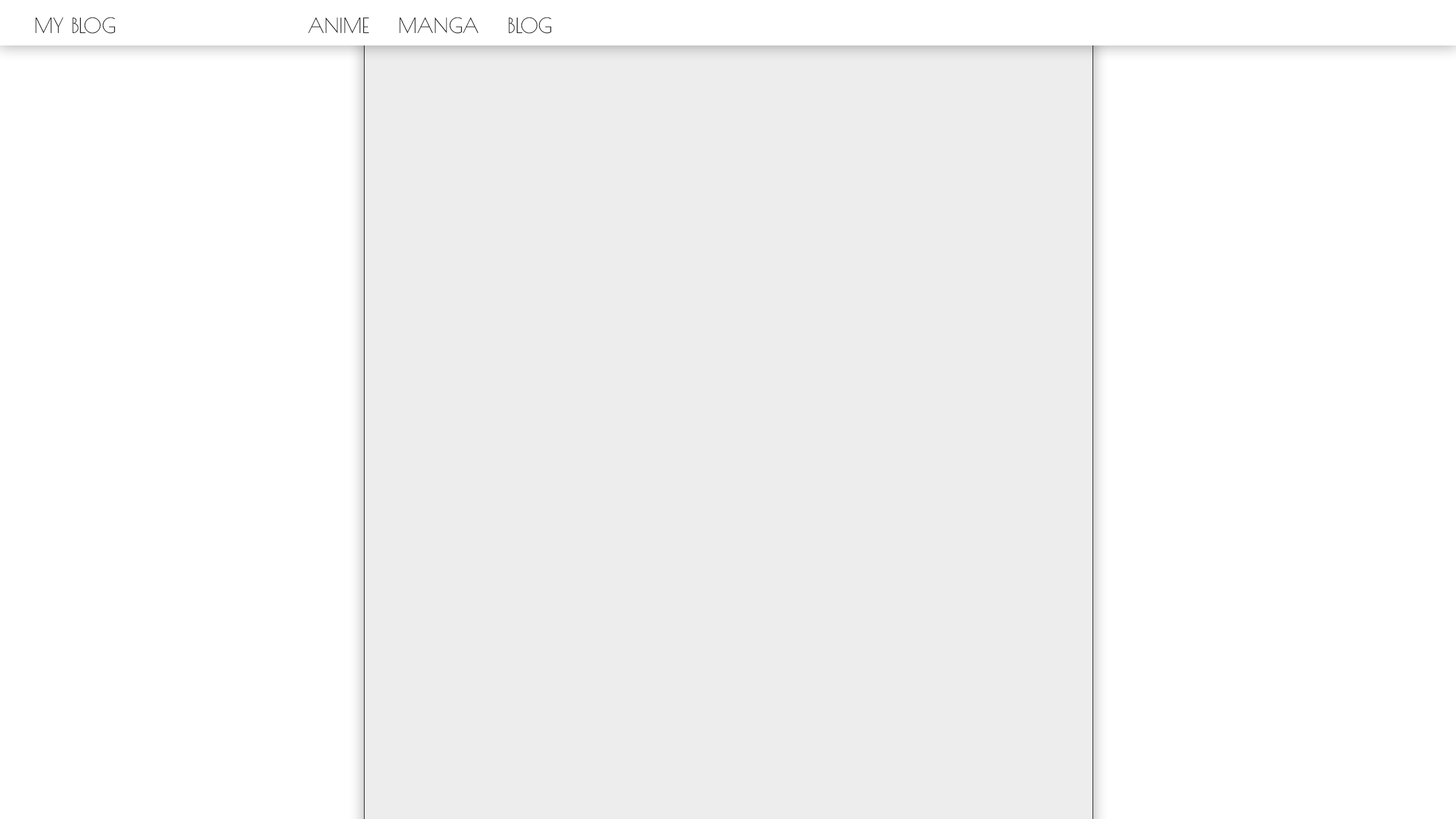
<style>
.page{position:relative;width:1456px;height:819px;background:#ffffff}
.page>*{position:absolute;margin:0}
.t1{font:20.5px "PoiretOne-Regular";color:#030303}
</style>
<div class="page">
<p class="t1" style="left:35px;top:17px;width:80px;height:17px">MY BLOG</p>
<p class="t1" style="left:308px;top:17px;width:61px;height:17px">ANIME</p>
<p class="t1" style="left:399px;top:17px;width:79px;height:17px">MANGA</p>
<p class="t1" style="left:508px;top:17px;width:44px;height:17px">BLOG</p>
</div>
